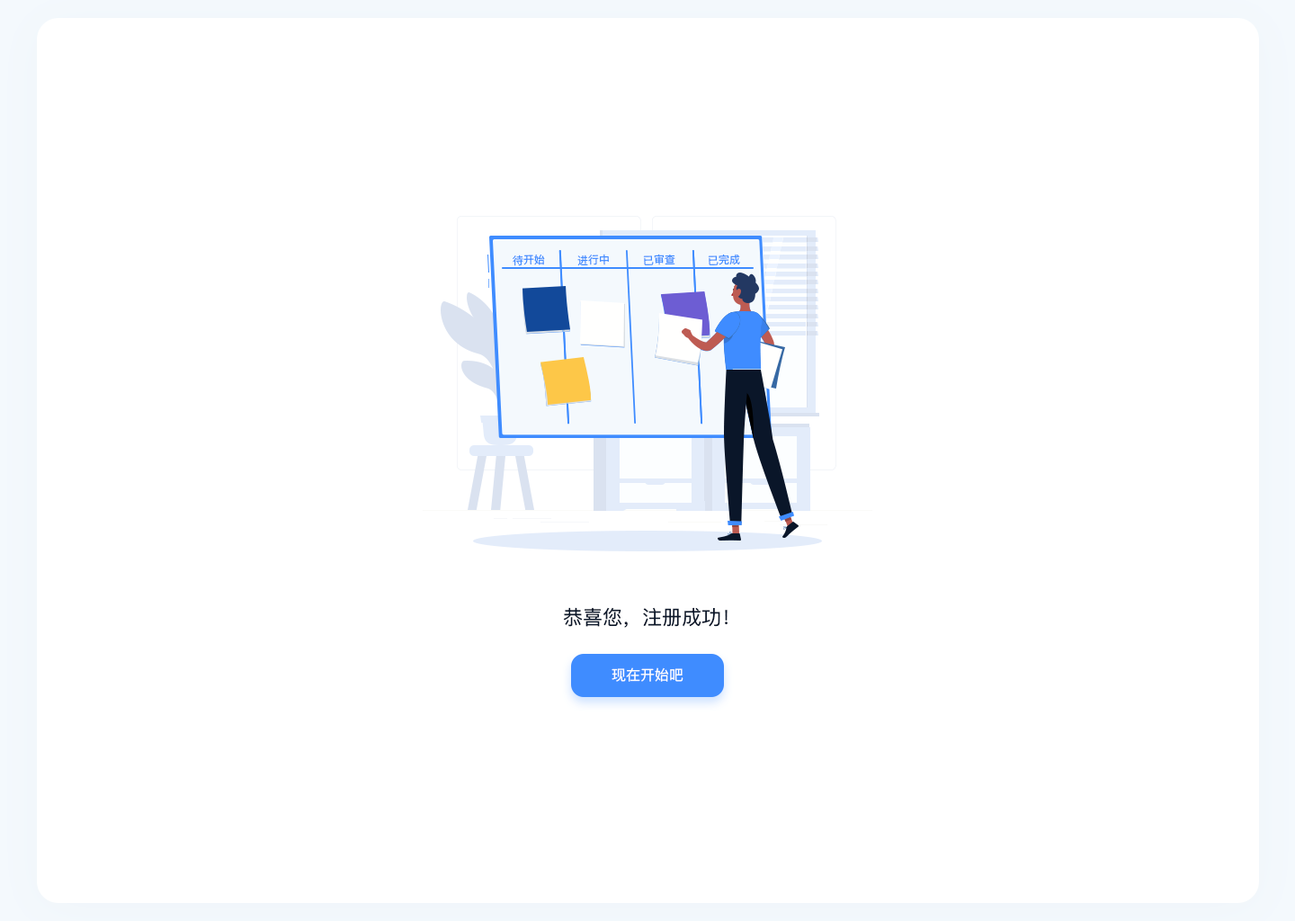
<style>
.page{position:relative;width:1295px;height:921px;background:#ffffff}
.page>*{position:absolute;margin:0}
.t1{font:10.8px "PingFangSC-Regular";color:#3f8cff}
.t2{font:19.8px "PingFangSC-Regular";color:#0a1629}
.t3{font:14.4px "PingFangSC-Regular";color:#ffffff}
</style>
<div class="page">
<p class="t1" style="left:513px;top:254px;width:32px;height:12px;rotate:-1deg">待开始</p>
<p class="t1" style="left:577px;top:254px;width:32px;height:12px;rotate:-1deg">进行中</p>
<p class="t1" style="left:643px;top:254px;width:32px;height:11px;rotate:-1deg">已审查</p>
<p class="t1" style="left:708px;top:254px;width:32px;height:11px;rotate:-1deg">已完成</p>
<p class="t2" style="left:563px;top:607px;width:165px;height:21px">恭喜您，注册成功！</p>
<p class="t3" style="left:611px;top:667px;width:72px;height:15px">现在开始吧</p>
</div>
